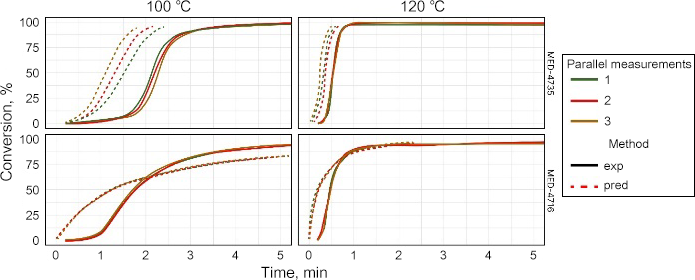
<style>
.page{position:relative;width:695px;height:280px;background:#ffffff}
.page>*{position:absolute;margin:0}
.t1{font:15.3px "ArialUnicodeMS";color:#000000}
.t2{font:12.2px "ArialUnicodeMS";color:#000000}
.t3{font:12.2px "ArialUnicodeMS";letter-spacing:3.12em;color:#000000}
</style>
<div class="page">
<p class="t1" style="left:147px;top:0px;width:44px;height:12px">100 ℃</p>
<p class="t1" style="left:401px;top:0px;width:44px;height:12px">120 ℃</p>
<p class="t2" style="left:20px;top:17px;width:19px;height:111px;text-align:right">100<br>75<br>50<br>25<br>0</p>
<p class="t2" style="left:567px;top:59px;width:125px;height:10px">Parallel measurements</p>
<p class="t2" style="left:604px;top:75px;width:7px;height:51px;text-align:center">1<br>2<br>3</p>
<p class="t1" style="left:0px;top:83px;width:14px;height:98px;rotate:-90deg">Conversion, %</p>
<p class="t2" style="left:20px;top:134px;width:19px;height:111px;text-align:right">100<br>75<br>50<br>25<br>0</p>
<p class="t2" style="left:609px;top:139px;width:40px;height:9px">Method</p>
<p class="t2" style="left:604px;top:163px;width:24px;height:29px">exp<br>pred</p>
<p class="t3" style="left:52px;top:250px;width:232px;height:10px">012345</p>
<p class="t3" style="left:305px;top:250px;width:232px;height:10px">012345</p>
<p class="t1" style="left:261px;top:266px;width:66px;height:14px">Time, min</p>
</div>
